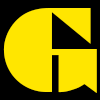
<style>
.page{position:relative;width:100px;height:100px;background:#ffe600}
.page>*{position:absolute;margin:0}
.t1{font:108.9px "Braggadocio";color:#ffe600}
</style>
<div class="page">
<p class="t1" style="left:3px;top:8px;width:94px;height:85px">G</p>
</div>
